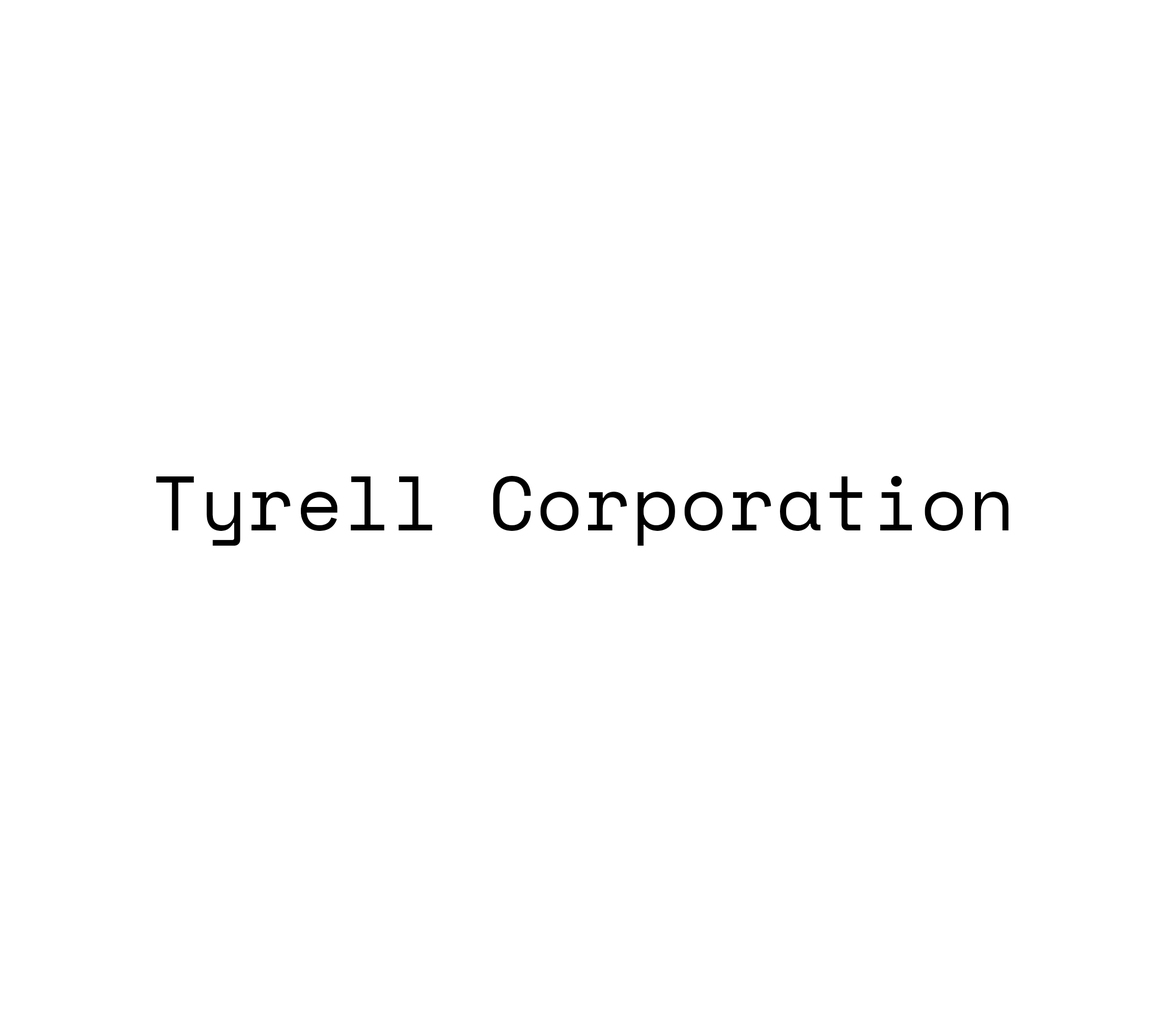
<style>
.page{position:relative;width:1171px;height:1018px;background:#ffffff}
.page>*{position:absolute;margin:0}
.t1{font:76.6px "SpaceMono-Regular";letter-spacing:0.015em;color:#000000}
</style>
<div class="page">
<p class="t1" style="left:156px;top:476px;width:853px;height:70px">Tyrell Corporation</p>
</div>
